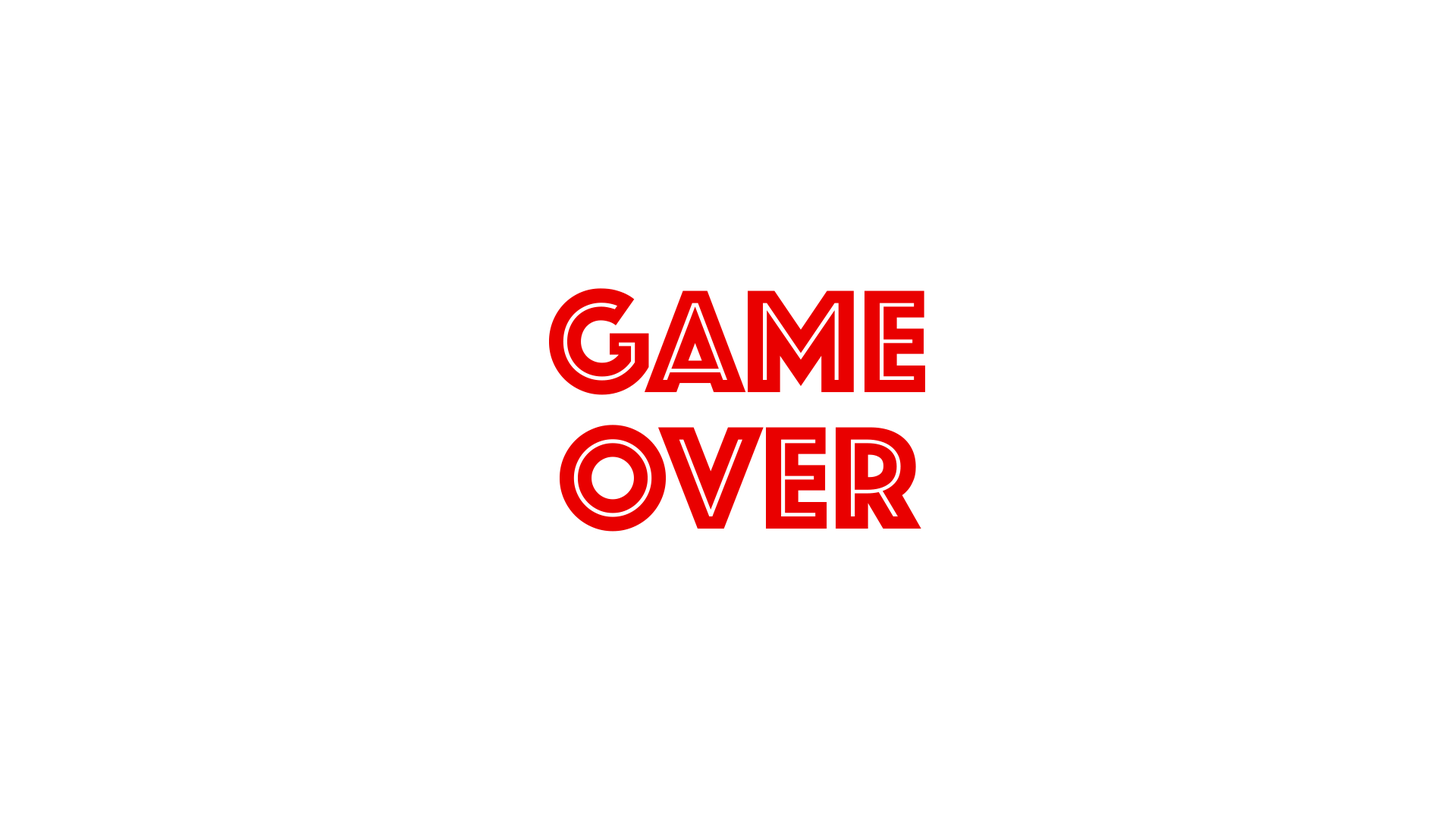
<style>
.page{position:relative;width:1456px;height:819px;background:#ffffff}
.page>*{position:absolute;margin:0}
.t1{font:151.7px/136.5px "Phosphate-Inline";color:#e90000}
</style>
<div class="page">
<p class="t1" style="left:549px;top:288px;width:376px;height:244px;text-align:center">GAME<br>OVER</p>
</div>
